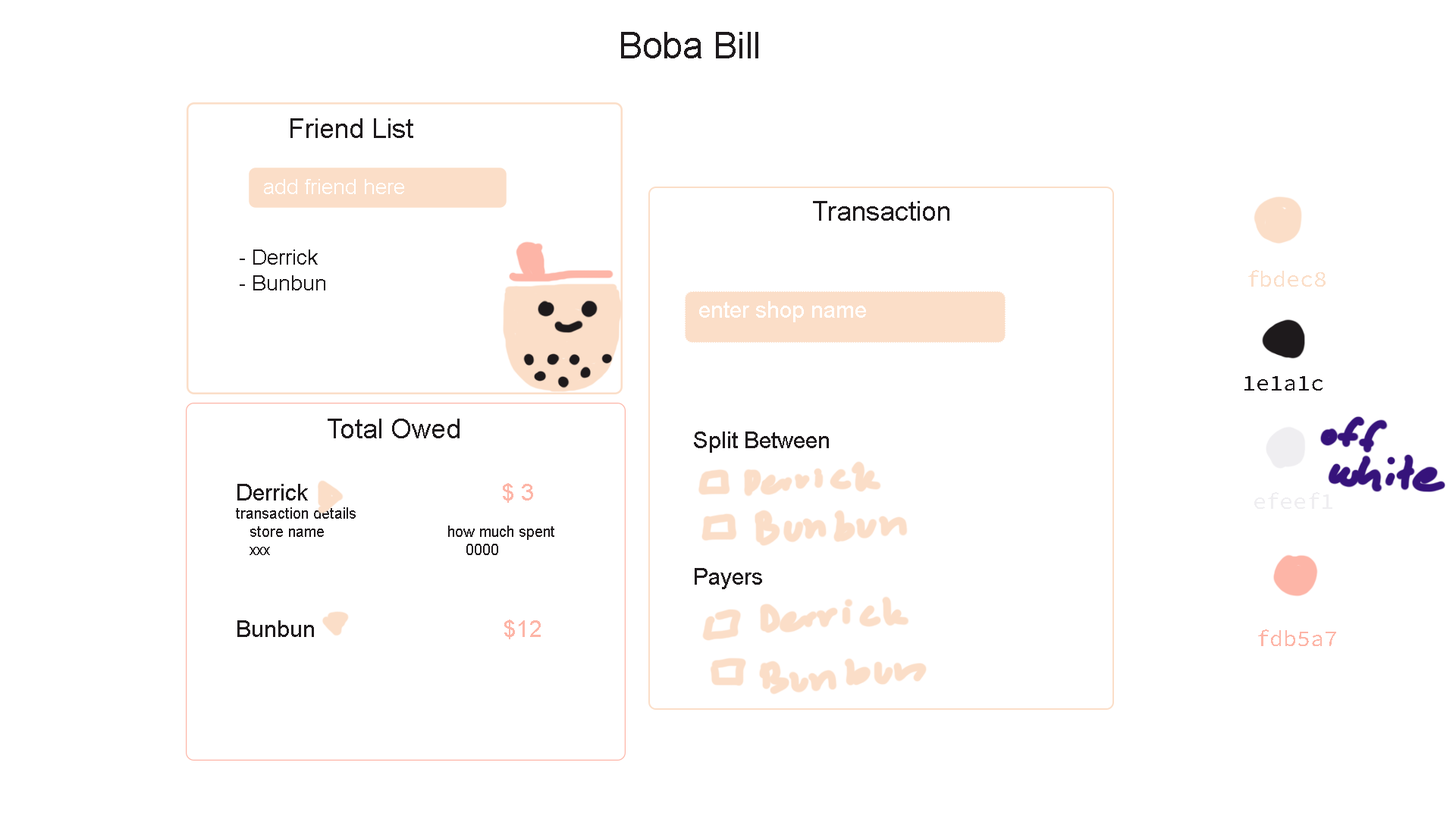
<style>
.page{position:relative;width:1456px;height:819px;background:#ffffff}
.page>*{position:absolute;margin:0}
.t1{font:36.4px "ArialMT";color:#1e1a1c}
.t2{font:27.3px "ArialMT";color:#1e1a1c}
.t3{font:21.2px "ArialMT";color:#ffffff}
.t4{font:21.2px "ArialMT";color:#1e1a1c}
.t5{font:22.7px "SourceCodeVariable-Roman";color:#fbdec8}
.t6{font:22.7px "ArialMT";color:#ffffff}
.t7{font:22.7px "SourceCodeVariable-Roman";color:#1e1a1c}
.t8{font:22.7px "ArialMT";color:#1e1a1c}
.t9{font:15.2px "ArialMT";color:#1e1a1c}
.t10{font:22.7px "ArialMT";color:#fdb5a7}
.t11{font:22.7px "SourceCodeVariable-Roman";color:#efeef1}
.t12{font:22.7px "SourceCodeVariable-Roman";color:#fdb5a7}
</style>
<div class="page">
<p class="t1" style="left:621px;top:32px;width:137px;height:26px">Boba Bill</p>
<p class="t2" style="left:290px;top:118px;width:123px;height:20px">Friend List</p>
<p class="t3" style="left:264px;top:179px;width:140px;height:15px">add friend here</p>
<p class="t2" style="left:813px;top:201px;width:136px;height:20px">Transaction</p>
<p class="t4" style="left:240px;top:249px;width:85px;height:41px">- Derrick<br>- Bunbun</p>
<p class="t5" style="left:1248px;top:270px;width:78px;height:17px">fbdec8</p>
<p class="t6" style="left:699px;top:301px;width:167px;height:21px">enter shop name</p>
<p class="t7" style="left:1244px;top:376px;width:79px;height:15px">1e1a1c</p>
<p class="t2" style="left:328px;top:419px;width:132px;height:19px">Total Owed</p>
<p class="t8" style="left:694px;top:431px;width:135px;height:158px">Split Between<br><br><br><br><br>Payers</p>
<p class="t9" style="left:236px;top:483px;width:318px;height:156px"><span class="t8">Derrick                                </span><span class="t10">$ 3<br></span>transaction details<br>   store name                           how much spent<br>   xxx                                           0000<br><span class="t8"><br><br>Bunbun                               </span><span class="t10">$12</span></p>
<p class="t11" style="left:1254px;top:492px;width:78px;height:17px">efeef1</p>
<p class="t12" style="left:1258px;top:629px;width:78px;height:17px">fdb5a7</p>
</div>
